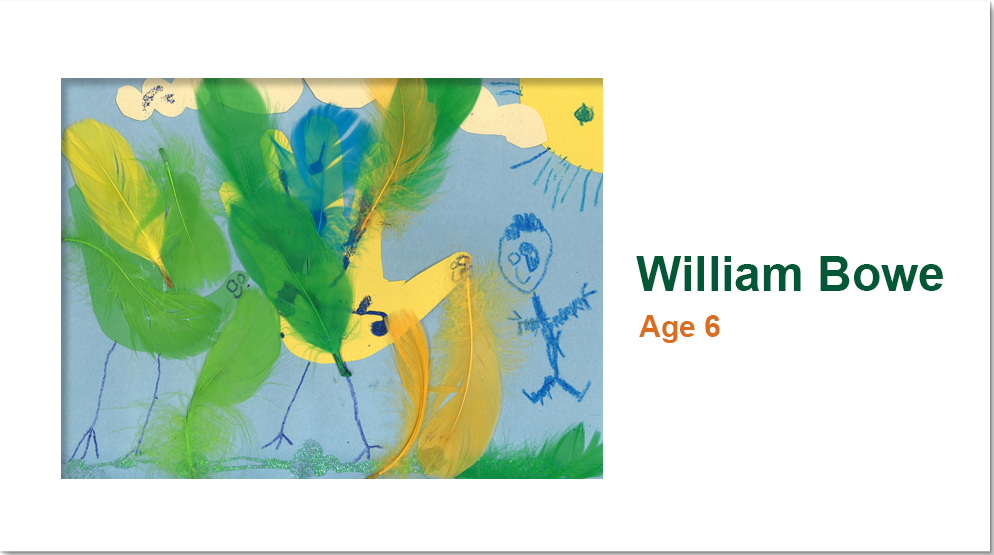
<style>
.page{position:relative;width:994px;height:555px;background:#ffffff}
.page>*{position:absolute;margin:0}
.t1{font:48px "Arial-BoldMT";color:#005837}
.t2{font:30px "Arial-BoldMT";color:#db6d1d}
</style>
<div class="page">
<p class="t1" style="left:636px;top:256px;width:307px;height:35px">William Bowe</p>
<p class="t2" style="left:639px;top:315px;width:81px;height:28px">Age 6</p>
</div>
